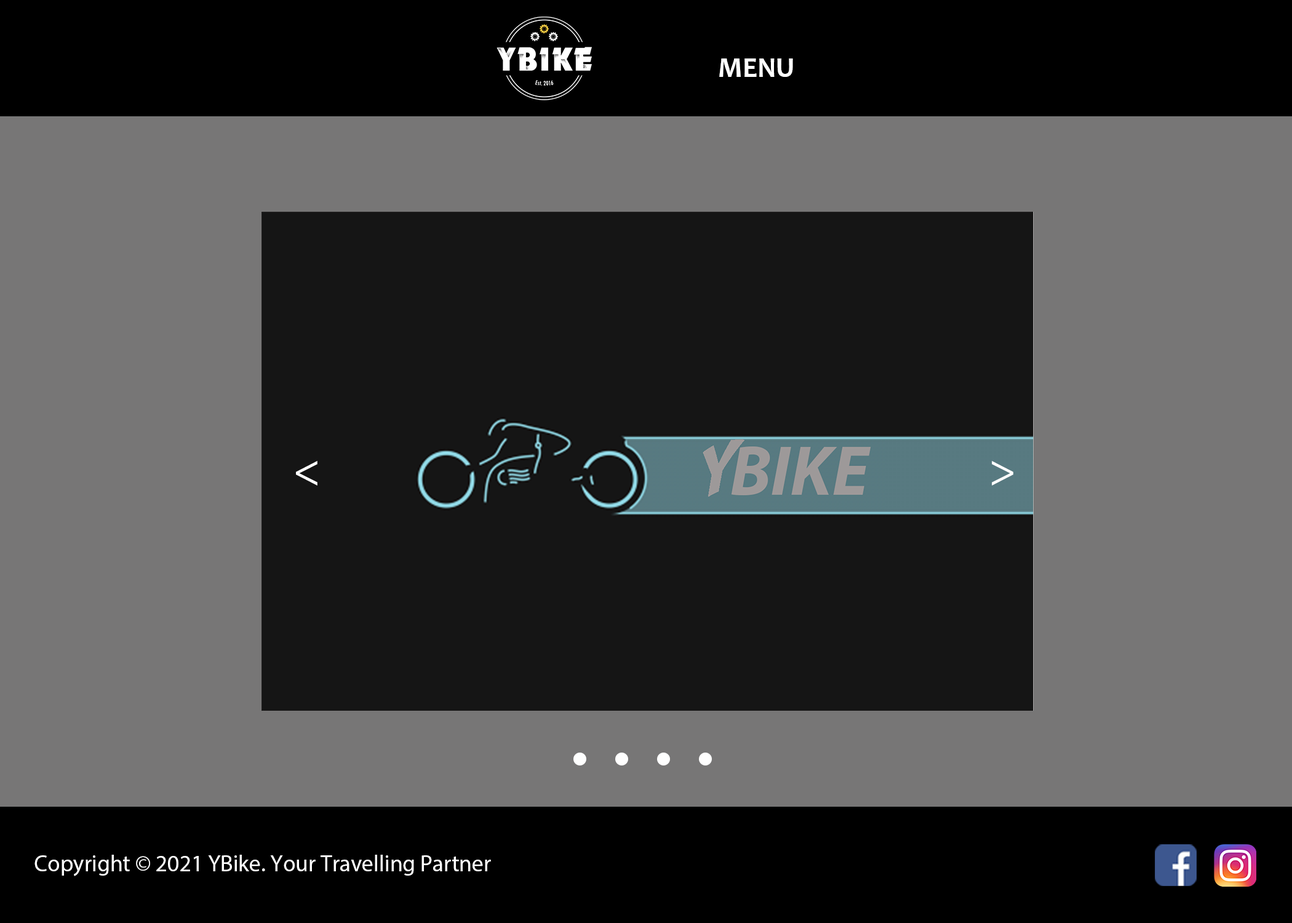
<style>
.page{position:relative;width:1292px;height:923px;background:#777676}
.page>*{position:absolute;margin:0}
.t1{font:28.2px "Candara-Bold";color:#ffffff}
.t2{font:46.1px "MyriadPro-Regular";color:#ffffff}
.t3{font:23.1px "MyriadPro-Regular";color:#ffffff}
</style>
<div class="page">
<p class="t1" style="left:719px;top:58px;width:74px;height:19px">MENU</p>
<p class="t2" style="left:296px;top:461px;width:21px;height:24px">&lt;</p>
<p class="t2" style="left:992px;top:461px;width:21px;height:24px">&gt;</p>
<p class="t3" style="left:34px;top:855px;width:457px;height:21px">Copyright © 2021 YBike. Your Travelling Partner</p>
</div>
